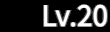
<style>
.page{position:relative;width:110px;height:32px;background:#000000}
.page>*{position:absolute;margin:0}
.t1{font:28px "WebPSD-18463539-0-Regular";color:#ffffff;font-weight:bold}
</style>
<div class="page">
<p class="t1" style="left:0px;top:0px;width:110px;height:32px">Lv.20</p>
</div>
